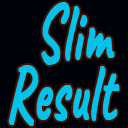
<style>
.page{position:relative;width:128px;height:128px;background:#000209}
.page>*{position:absolute;margin:0}
.t1{font:79.2px/60px "Caveat-Bold";color:#03c4eb;font-weight:bold;scale:0.61 1}
</style>
<div class="page">
<p class="t1" style="left:8px;top:2px;width:112px;height:124px;text-align:center">Slim<br>Result</p>
</div>
